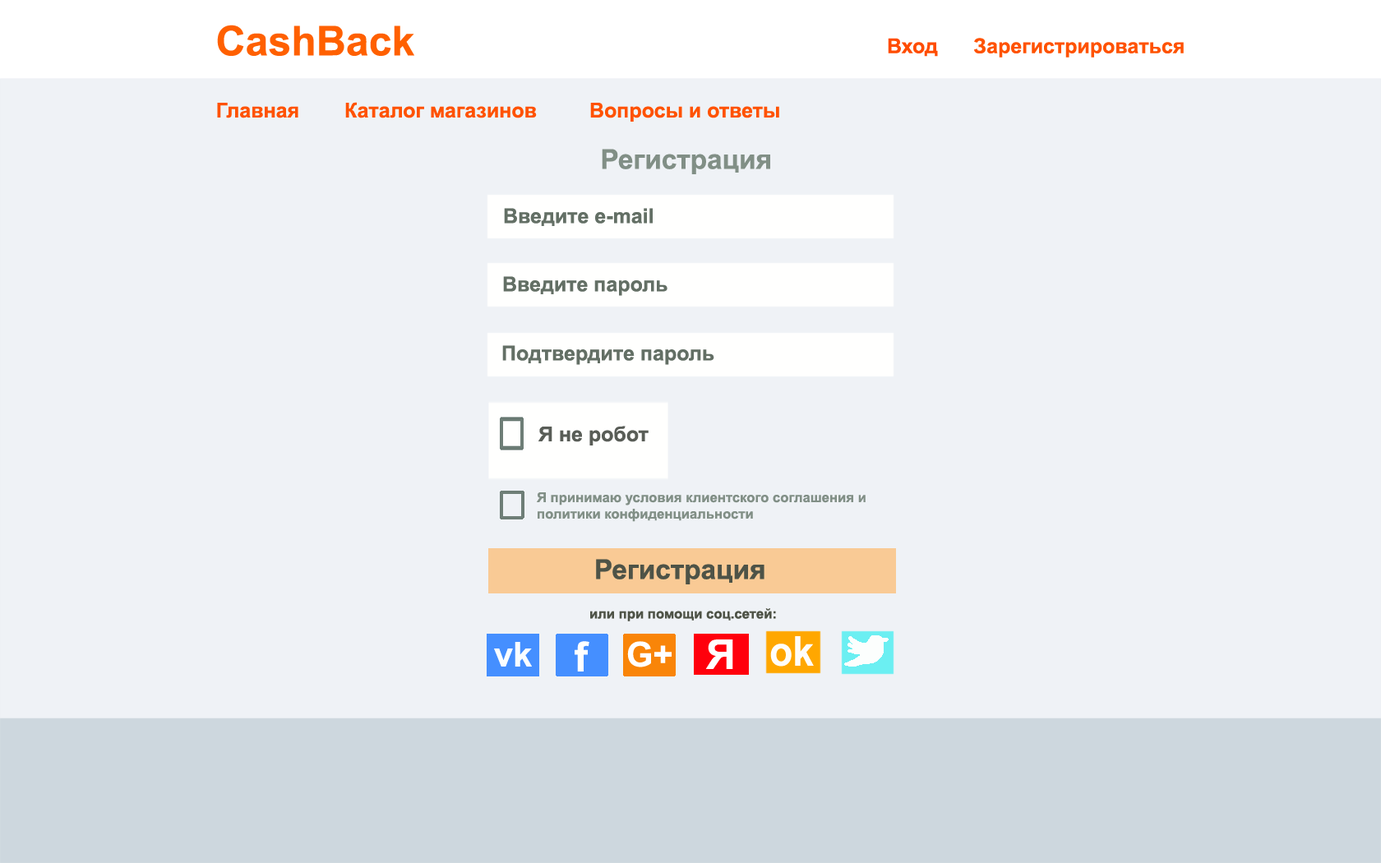
<style>
.page{position:relative;width:1381px;height:863px;background:#eff2f6}
.page>*{position:absolute;margin:0}
.t1{font:41.1px "Arial-BoldMT";color:#ff6000}
.t2{font:20.6px "Arial-BoldMT";color:#ff4c00}
.t3{font:20.6px "Arial-BoldMT";color:#ff5200}
.t4{font:27.4px "Arial-BoldMT";color:#818e86}
.t5{font:20.6px "Arial-BoldMT";color:#637065}
.t6{font:20.6px "Arial-BoldMT";color:#595e57}
.t7{font:13.7px "Arial-BoldMT";color:#818e86}
.t8{font:27.4px "Arial-BoldMT";color:#4f5347}
.t9{font:13.7px "Arial-BoldMT";color:#4f5347}
.t10{font:41.1px "Arial-BoldMT";color:#ffffff}
.t11{font:34.3px "Arial-BoldMT";color:#ffffff}
.t12{font:41.1px "Arial-BoldMT";color:#fffdfa;scale:0.93 1}
.t13{font:34.3px "Arial-BoldMT";color:#fbfeff}
</style>
<div class="page">
<p class="t1" style="left:217px;top:25px;width:197px;height:31px">CashBack</p>
<p class="t2" style="left:888px;top:38px;width:50px;height:19px">Вход</p>
<p class="t3" style="left:974px;top:38px;width:210px;height:20px">Зарегистрироваться</p>
<p class="t3" style="left:345px;top:102px;width:192px;height:16px">Каталог магазинов</p>
<p class="t3" style="left:217px;top:103px;width:81px;height:15px">Главная</p>
<p class="t3" style="left:590px;top:103px;width:189px;height:19px">Вопросы и ответы</p>
<p class="t4" style="left:602px;top:149px;width:168px;height:25px">Регистрация</p>
<p class="t5" style="left:504px;top:208px;width:149px;height:18px">Введите e-mail</p>
<p class="t5" style="left:503px;top:276px;width:165px;height:20px">Введите пароль</p>
<p class="t5" style="left:502px;top:345px;width:212px;height:20px">Подтвердите пароль</p>
<p class="t6" style="left:539px;top:426px;width:110px;height:20px">Я не робот</p>
<p class="t7" style="left:537px;top:492px;width:329px;height:30px">Я принимаю условия клиентского соглашения и политики конфиденциальности</p>
<p class="t8" style="left:596px;top:559px;width:169px;height:26px">Регистрация</p>
<p class="t9" style="left:590px;top:608px;width:186px;height:14px">или при помощи соц.сетей:</p>
<p class="t10" style="left:575px;top:641px;width:15px;height:31px">f</p>
<p class="t11" style="left:627px;top:641px;width:45px;height:27px">G+</p>
<p class="t10" style="left:705px;top:640px;width:28px;height:29px">Я</p>
<p class="t12" style="left:770px;top:636px;width:44px;height:31px">ok</p>
<p class="t13" style="left:494px;top:642px;width:38px;height:25px">vk</p>
</div>
